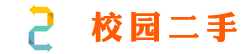
<style>
.page{position:relative;width:246px;height:54px;background:#ffffff}
.page>*{position:absolute;margin:0}
.t1{font:32px "DFLiJinHeiW8";letter-spacing:0.21em;color:#ff5b04}
</style>
<div class="page">
<p class="t1" style="left:91px;top:11px;width:147px;height:32px">校园二手</p>
</div>
